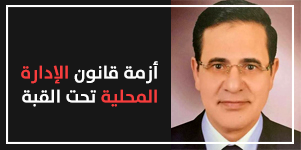
<style>
.page{position:relative;width:301px;height:150px;background:#171717}
.page>*{position:absolute;margin:0}
.t1{font:18px/24px "TheSans-Bold";color:#f73d3d}
.t2{font:18px/24px "TheSans-Bold";color:#ffffff}
</style>
<div class="page">
<p class="t1" style="left:21px;top:61px;width:137px;height:46px"><span class="t2">أزمة قانون </span>الإدارة <br>المحلية<span class="t2"> تحت القبة</span></p>
</div>
